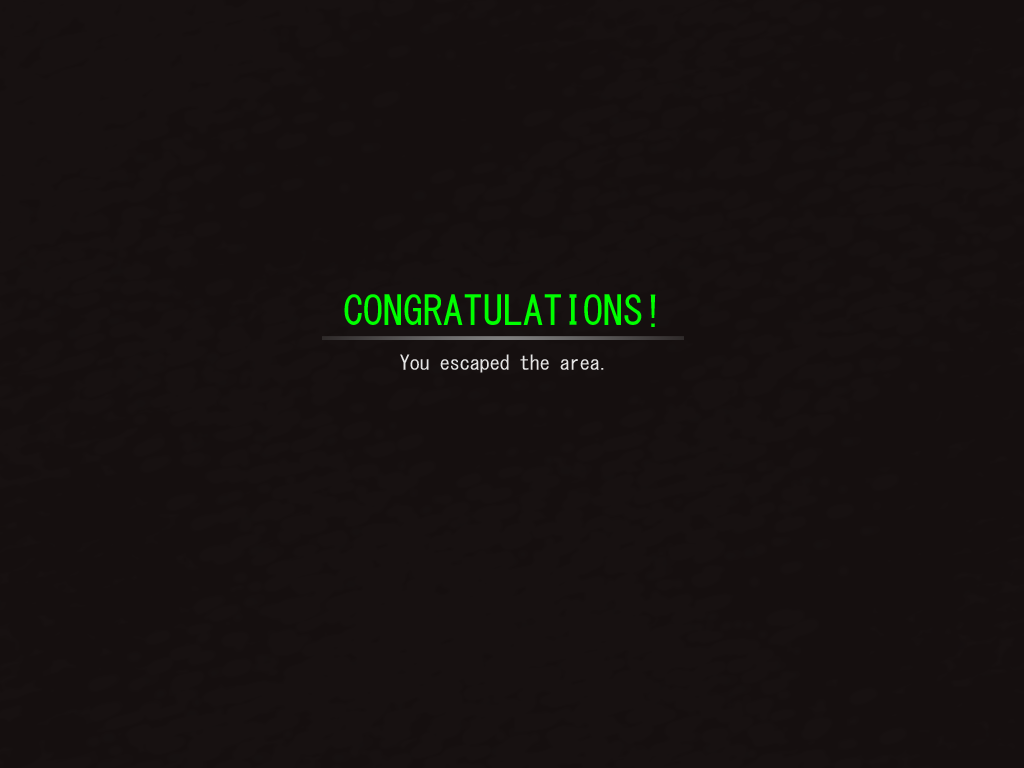
<style>
.page{position:relative;width:1024px;height:768px;background:#150f0f}
.page>*{position:absolute;margin:0}
.t1{font:40px "MS-Gothic";color:#00ff00}
.t2{font:20px "MS-Gothic";color:#e6e6e6}
</style>
<div class="page">
<p class="t1" style="left:344px;top:294px;width:312px;height:33px">CONGRATULATIONS!</p>
<p class="t2" style="left:400px;top:354px;width:204px;height:19px">You escaped the area.</p>
</div>
